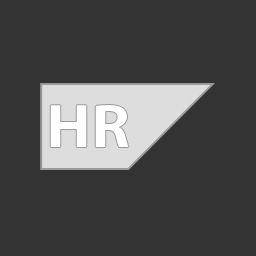
<style>
.page{position:relative;width:256px;height:256px;background:#333333}
.page>*{position:absolute;margin:0}
.t1{font:54.2px "AdobeGothicStd-Bold";color:#ffffff;scale:1.18 1}
</style>
<div class="page">
<p class="t1" style="left:50px;top:105px;width:79px;height:42px">HR</p>
</div>
